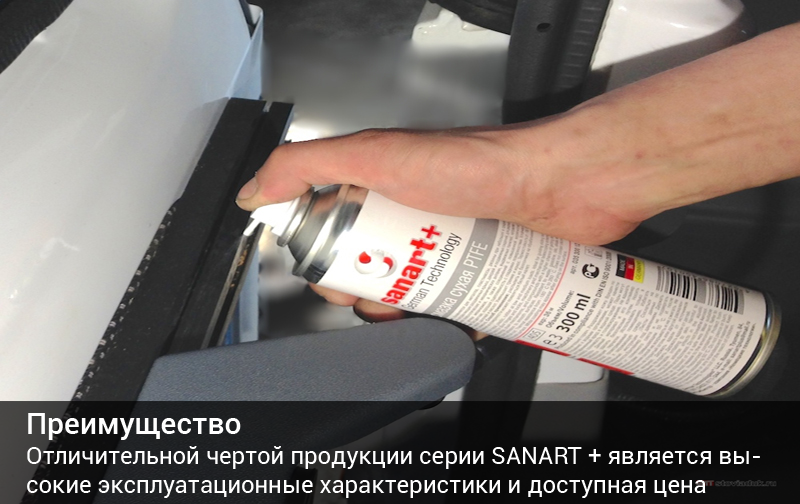
<style>
.page{position:relative;width:800px;height:504px}
.page>*{position:absolute;margin:0}
.t1{font:30px "Roboto-Medium";color:#ffffff}
.t2{font:24px "Roboto-Regular";color:#ffffff}
</style>
<div class="page">
<p class="t1" style="left:28px;top:413px;width:213px;height:27px">Преимущество</p>
<p class="t2" style="left:27px;top:446px;width:733px;height:52px">Отличительной чертой продукции серии SANART + является высокие эксплуатационные характеристики и доступная цена</p>
</div>
